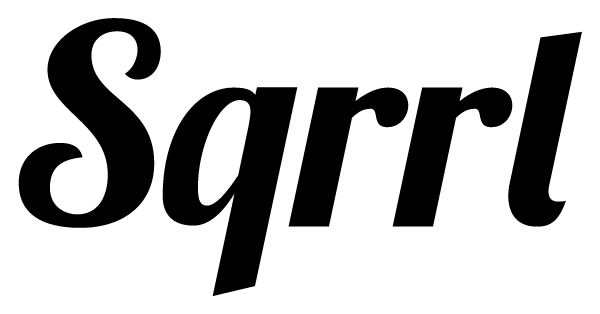
<style>
.page{position:relative;width:600px;height:314px;background:#ffffff}
.page>*{position:absolute;margin:0}
.t1{font:277.8px "Lobster1.3";letter-spacing:-0.005em;color:#000000}
</style>
<div class="page">
<p class="t1" style="left:18px;top:18px;width:564px;height:278px">Sqrrl</p>
</div>
